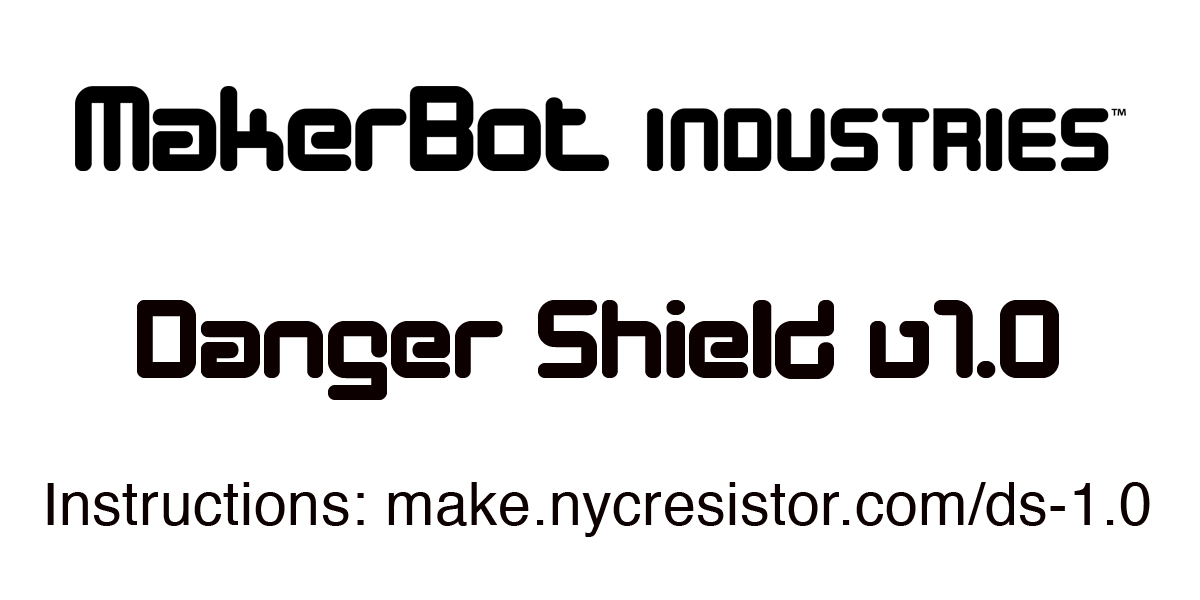
<style>
.page{position:relative;width:1200px;height:600px;background:#ffffff}
.page>*{position:absolute;margin:0}
.t1{font:114.5px "DesignerBlock";letter-spacing:0.01em;color:#0c0000}
.t2{font:59.1px "Helvetica";letter-spacing:0.01em;color:#0c0000}
</style>
<div class="page">
<p class="t1" style="left:137px;top:300px;width:922px;height:100px">Danger Shield v1.0</p>
<p class="t2" style="left:47px;top:482px;width:1103px;height:55px">Instructions: make.nycresistor.com/ds-1.0</p>
</div>
